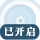
<style>
.page{position:relative;width:40px;height:40px}
.page>*{position:absolute;margin:0}
.t1{font:10px "HYa9gj";letter-spacing:0.1em;color:#ffffff}
</style>
<div class="page">
<p class="t1" style="left:4px;top:26px;width:31px;height:11px">已开启</p>
</div>
